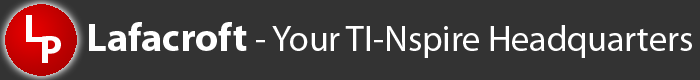
<style>
.page{position:relative;width:700px;height:80px;background:#333333}
.page>*{position:absolute;margin:0}
.t1{font:40px "MyriadPro-Bold";color:#fefefe}
.t2{font:36px "MyriadPro-Regular";color:#ffffff}
.t3{font:40px "MyriadPro-Bold";color:#ffffff}
</style>
<div class="page">
<p class="t1" style="left:26px;top:15px;width:17px;height:27px">L</p>
<p class="t2" style="left:89px;top:22px;width:603px;height:36px"><span class="t3">Lafacroft</span> - Your TI-Nspire Headquarters</p>
<p class="t1" style="left:42px;top:36px;width:19px;height:27px">P</p>
</div>
